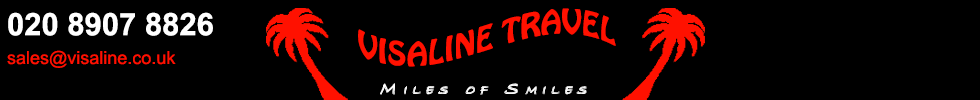
<style>
.page{position:relative;width:980px;height:100px;background:#000000}
.page>*{position:absolute;margin:0}
.t1{font:18px "ArialMT";color:#ff1100}
.t2{font:31px "Arial-BoldMT";color:#ffffff}
.t3{font:30px "HoboStd";color:#ff1100}
.t4{font:18px "BradleyHandITC";letter-spacing:0.44em;color:#ffffff;font-variant:small-caps;font-style:italic}
</style>
<div class="page">
<p class="t1" style="left:7px;top:12px;width:206px;height:56px"><span class="t2">020 8907 8826<br><br></span>sales@visaline.co.uk</p>
<p class="t3" style="left:358px;top:8px;width:258px;height:59px;text-align:center">VISALINE TRAVEL</p>
<p class="t4" style="left:380px;top:84px;width:206px;height:11px">Miles of Smiles</p>
<p class="t4" style="left:381px;top:83px;width:206px;height:11px">Miles of Smiles</p>
<p class="t4" style="left:381px;top:84px;width:206px;height:11px">Miles of Smiles</p>
</div>
